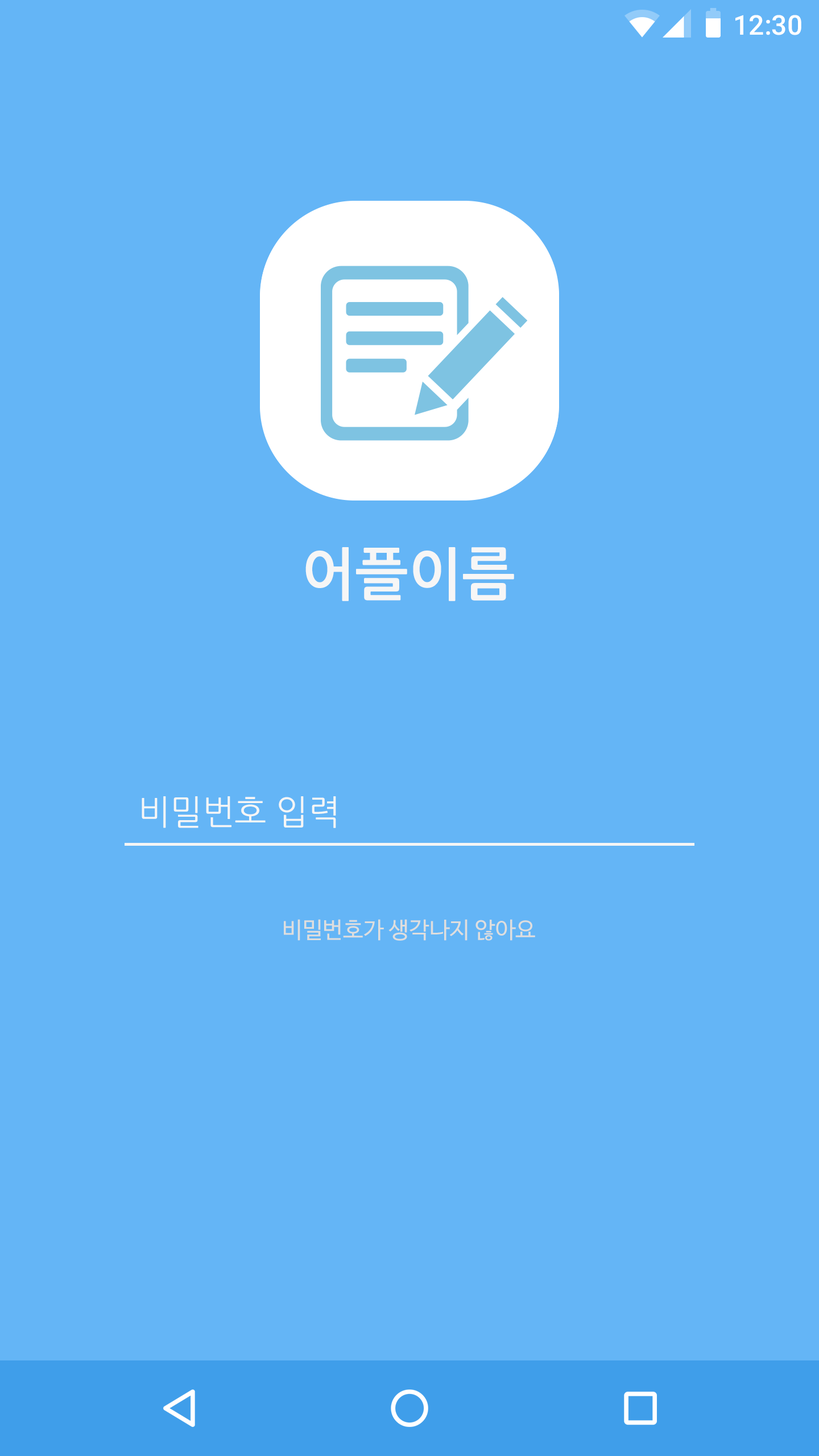
<style>
.page{position:relative;width:819px;height:1456px;background:#64b5f6}
.page>*{position:absolute;margin:0}
.t1{font:27.3px "Roboto-Medium";color:#ffffff}
.t2{font:56.9px "NanumGothicBold";color:#f6f6f6}
.t3{font:34.1px "NanumGothic";color:#f6f6f6}
.t4{font:22.7px "NanumBarunGothic";color:#dedede}
</style>
<div class="page">
<p class="t1" style="left:735px;top:15px;width:66px;height:20px">12:30</p>
<p class="t2" style="left:305px;top:547px;width:209px;height:54px">어플이름</p>
<p class="t3" style="left:142px;top:796px;width:194px;height:32px">비밀번호 입력</p>
<p class="t4" style="left:284px;top:919px;width:251px;height:22px">비밀번호가 생각나지 않아요</p>
</div>
